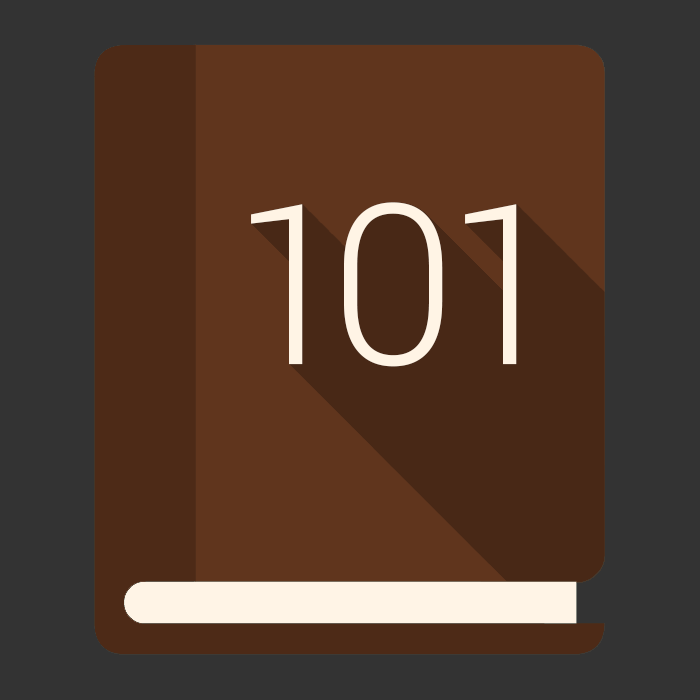
<style>
.page{position:relative;width:700px;height:700px;background:#333333}
.page>*{position:absolute;margin:0}
.t1{font:224px "Roboto-Light";color:#fff4e5}
</style>
<div class="page">
<p class="t1" style="left:251px;top:202px;width:266px;height:165px">101</p>
</div>
